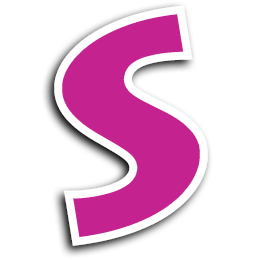
<style>
.page{position:relative;width:260px;height:260px;background:#ffffff}
.page>*{position:absolute;margin:0}
.t1{font:322px "LithosPro-Black";color:#c4238f}
</style>
<div class="page">
<p class="t1" style="left:54px;top:5px;width:154px;height:241px">S</p>
</div>
